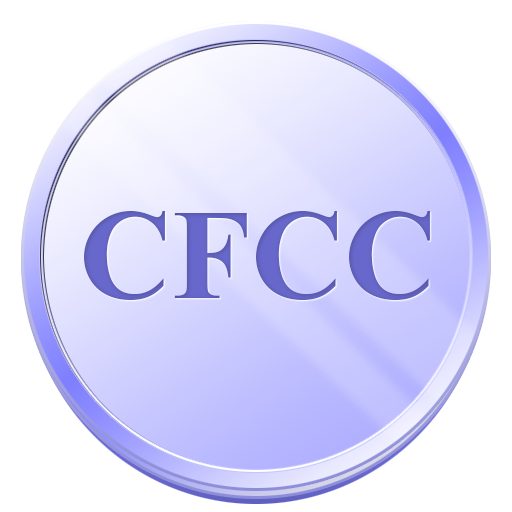
<style>
.page{position:relative;width:512px;height:512px;background:#ffffff}
.page>*{position:absolute;margin:0}
.t1{font:160px "Aparajita-Bold";color:#6868cc}
</style>
<div class="page">
<p class="t1" style="left:84px;top:211px;width:346px;height:89px">CFCC</p>
</div>
